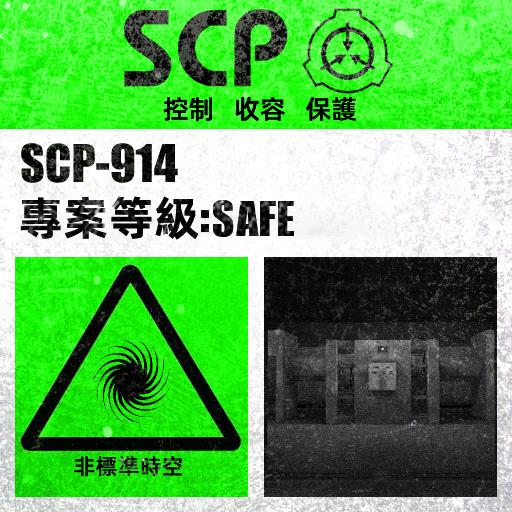
<style>
.page{position:relative;width:512px;height:512px}
.page>*{position:absolute;margin:0}
.t1{font:26.1px "AlibabaPuHuiTiM";color:#000000}
.t2{font:46.1px "AlibabaPuHuiTiB";color:#000000}
.t3{font:62.2px "URWImpactW01-Bold";letter-spacing:0.02em;color:#000000}
.t4{font:52.1px "URWImpactW01-Bold";letter-spacing:0.02em;color:#000000}
.t5{font:22.1px "AlibabaPuHuiTiM";letter-spacing:0.02em;color:#000000}
</style>
<div class="page">
<p class="t1" style="left:163px;top:96px;width:193px;height:26px">控制   收容   保護</p>
<p class="t2" style="left:20px;top:196px;width:274px;height:44px">專案等級<span class="t3">:</span><span class="t4">SAFE</span></p>
<p class="t5" style="left:74px;top:455px;width:109px;height:22px">非標準時空</p>
</div>
